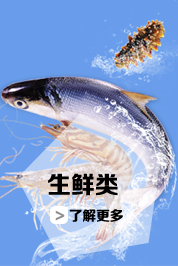
<style>
.page{position:relative;width:178px;height:266px;background:#699ceb}
.page>*{position:absolute;margin:0}
.t1{font:14px/36px "FZZDHJW--GB1-0";color:#000000}
.t2{font:24px/36px "FZZDHJW--GB1-0";color:#000000}
.t3{font:14px/36px "FZZDHJW--GB1-0";color:#8e8e8e}
</style>
<div class="page">
<p class="t1" style="left:48px;top:173px;width:75px;height:49px"><span class="t2">生鲜类<br>  </span><span class="t3">&gt;</span> 了解更多</p>
</div>
